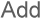
<style>
.page{position:relative;width:41px;height:24px;background:#ffffff}
.page>*{position:absolute;margin:0}
.t1{font:22.7px "ArialMT";color:#5c5c5c}
</style>
<div class="page">
<p class="t1" style="left:0px;top:1px;width:40px;height:17px">Add</p>
</div>
